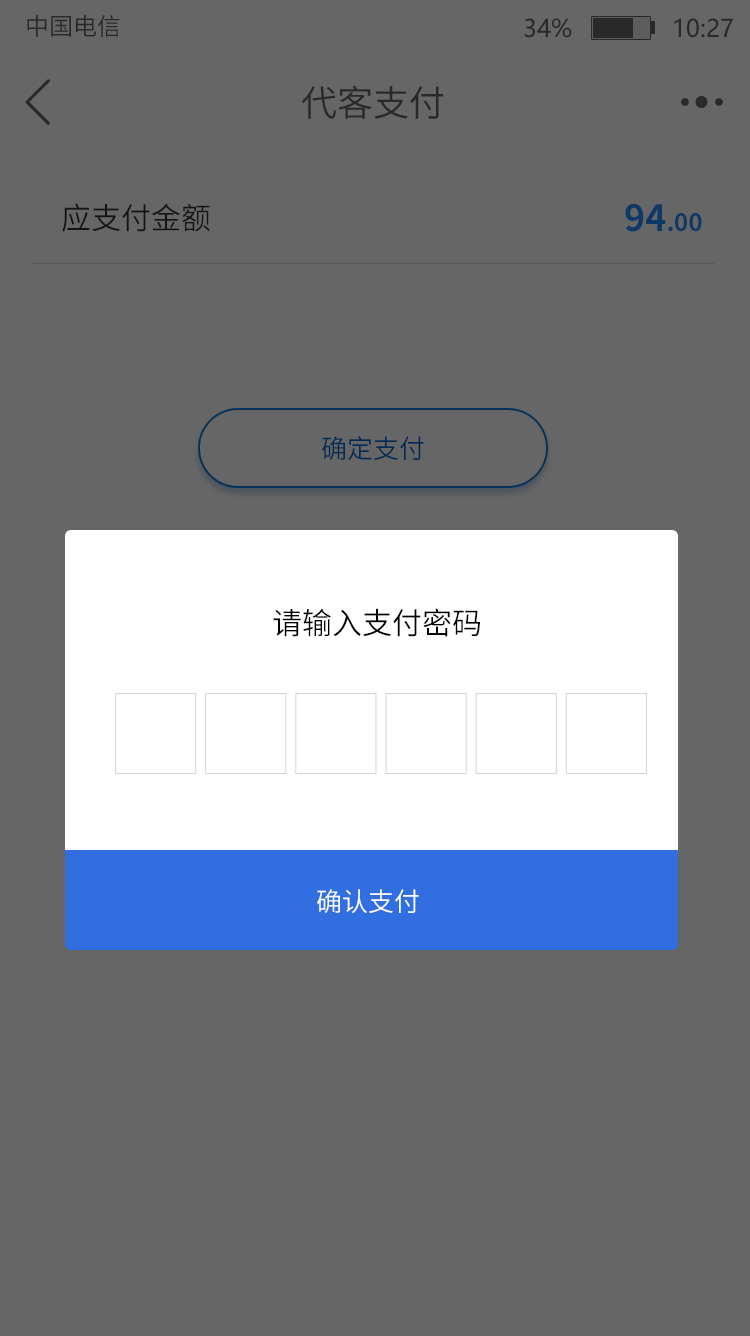
<style>
.page{position:relative;width:750px;height:1336px;background:#666666}
.page>*{position:absolute;margin:0}
.t1{font:24px "SourceHanSansCN-Normal";color:#282828}
.t2{font:24px "MicrosoftYaHei";color:#292929}
.t3{font:36px "SourceHanSansCN-Normal";color:#292929}
.t4{font:30px "SourceHanSansCN-Normal";color:#141414}
.t5{font:24px "SourceHanSansCN-Bold";color:#0e3866}
.t6{font:36px "SourceHanSansCN-Bold";color:#0e3866}
.t7{font:26px "SourceHanSansCN-Normal";color:#012a54}
.t8{font:30px "SourceHanSansCN-Normal";color:#000000}
.t9{font:26px "SourceHanSansCN-Normal";color:#ffffff}
</style>
<div class="page">
<p class="t1" style="left:27px;top:15px;width:93px;height:22px">中国电信</p>
<p class="t2" style="left:524px;top:18px;width:209px;height:20px">34%              10:27</p>
<p class="t3" style="left:301px;top:85px;width:143px;height:34px">代客支付</p>
<p class="t4" style="left:62px;top:203px;width:148px;height:29px">应支付金额</p>
<p class="t5" style="left:625px;top:203px;width:77px;height:29px"><span class="t6">94</span>.00</p>
<p class="t7" style="left:322px;top:436px;width:102px;height:24px">确定支付</p>
<p class="t8" style="left:273px;top:608px;width:207px;height:29px">请输入支付密码</p>
<p class="t9" style="left:317px;top:889px;width:102px;height:25px">确认支付</p>
</div>
